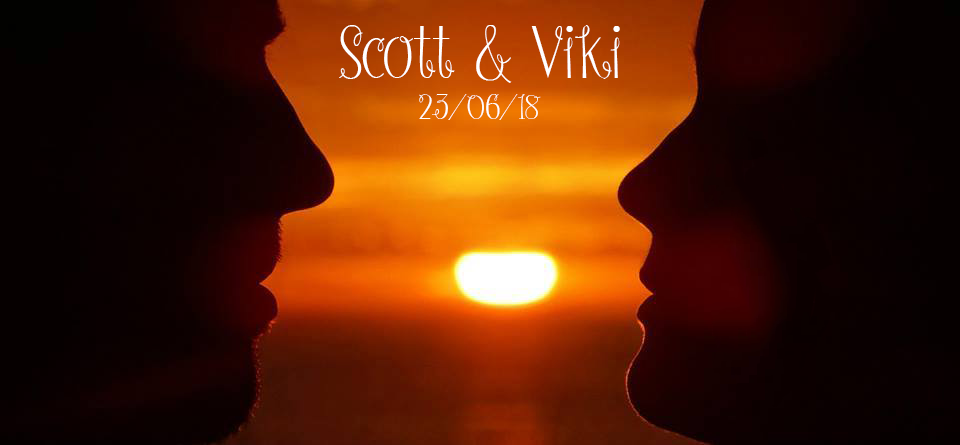
<style>
.page{position:relative;width:960px;height:445px}
.page>*{position:absolute;margin:0}
.t1{font:72px "Strawberry_Whipped_Cream";color:#ffffff}
.t2{font:34px "Strawberry_Whipped_Cream";color:#ffffff}
</style>
<div class="page">
<p class="t1" style="left:339px;top:25px;width:281px;height:95px;text-align:center">Scott &amp; Viki<br><span class="t2">23/06/18</span></p>
</div>
